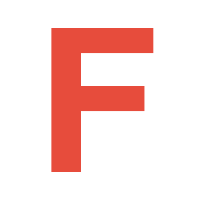
<style>
.page{position:relative;width:200px;height:200px;background:#ffffff}
.page>*{position:absolute;margin:0}
.t1{font:200px "Helvetica-Bold";letter-spacing:-0.05em;color:#e74c3c}
</style>
<div class="page">
<p class="t1" style="left:51px;top:28px;width:103px;height:144px">F</p>
</div>
